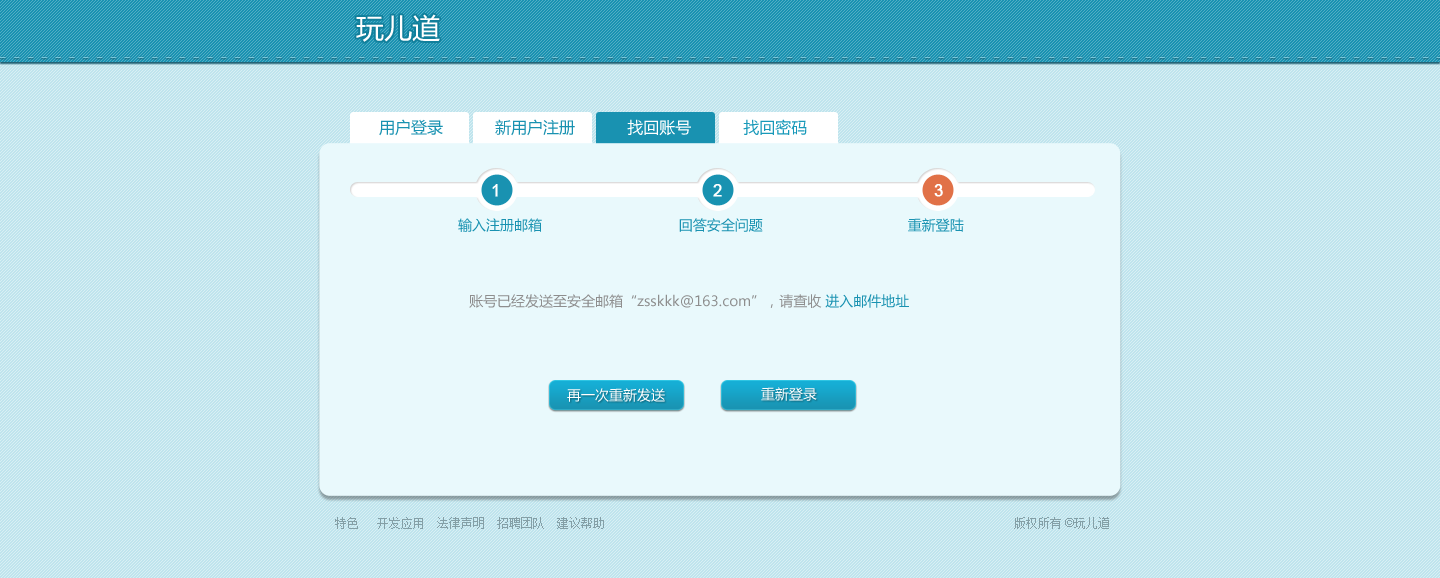
<style>
.page{position:relative;width:1440px;height:578px;background:#bfe4ed}
.page>*{position:absolute;margin:0}
.t1{font:28px "MicrosoftYaHei";color:#ffffff}
.t2{font:16px "MicrosoftYaHei";color:#1992b1}
.t3{font:16px "MicrosoftYaHei";color:#ffffff}
.t4{font:16px "MicrosoftYaHei";color:#1899b9}
.t5{font:16px "ArialMT";color:#ffffff;font-weight:bold}
.t6{font:14px "MicrosoftYaHei";color:#1992b1}
.t7{font:14px "MicrosoftYaHei";color:#8e8e8e}
.t8{font:14px "MicrosoftYaHei";color:#ffffff}
.t9{font:12px "SimSun";color:#849fa6}
.t10{font:12px "ArialMT";color:#849fa6}
</style>
<div class="page">
<p class="t1" style="left:356px;top:14px;width:84px;height:28px">玩儿道</p>
<p class="t2" style="left:379px;top:119px;width:428px;height:17px">用户登录           新用户注册           <span class="t3">找回账号           </span><span class="t4">找回密码</span></p>
<p class="t5" style="left:492px;top:184px;width:6px;height:13px">1</p>
<p class="t5" style="left:713px;top:184px;width:9px;height:13px">2</p>
<p class="t5" style="left:934px;top:184px;width:9px;height:13px">3</p>
<p class="t6" style="left:458px;top:218px;width:506px;height:14px">输入注册邮箱                                 回答安全问题                                   重新登陆</p>
<p class="t7" style="left:469px;top:294px;width:440px;height:14px">账号已经发送至安全邮箱“zsskkk@163.com”，请查收 <span class="t6">进入邮件地址</span></p>
<p class="t8" style="left:567px;top:388px;width:98px;height:14px">再一次重新发送</p>
<p class="t8" style="left:761px;top:387px;width:56px;height:14px">重新登录</p>
<p class="t9" style="left:335px;top:517px;width:269px;height:12px">特色   开发应用  法律声明  招聘团队  建议帮助</p>
<p class="t9" style="left:1014px;top:517px;width:95px;height:12px">版权所有<span class="t10"> ©</span>玩儿道</p>
</div>
